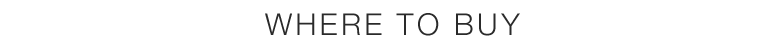
<style>
.page{position:relative;width:784px;height:47px;background:#ffffff}
.page>*{position:absolute;margin:0}
.t1{font:30px "HelveticaNeue-Light";letter-spacing:0.11em;color:#2a2a2a}
</style>
<div class="page">
<p class="t1" style="left:265px;top:13px;width:255px;height:23px">WHERE TO BUY</p>
</div>
